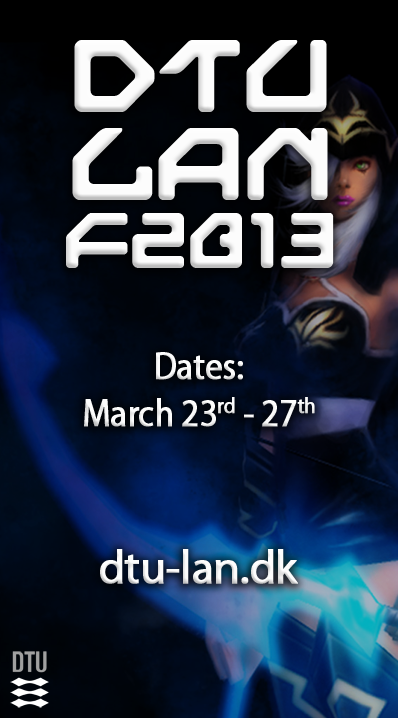
<style>
.page{position:relative;width:398px;height:718px}
.page>*{position:absolute;margin:0}
.t1{font:106.9px/87.5px "NextGames";letter-spacing:-0.025em;color:#fcfcfc}
.t2{font:82.6px/68.1px "NextGames";letter-spacing:-0.025em;color:#fcfcfc}
.t3{font:38.9px "MyriadPro-Regular";letter-spacing:-0.025em;color:#fcfcfc;font-weight:bold;scale:0.9 1}
.t4{font:46.7px "MyriadPro-Regular";letter-spacing:-0.025em;color:#fcfcfc;font-weight:bold}
</style>
<div class="page">
<p class="t1" style="left:66px;top:40px;width:268px;height:228px;text-align:center">DTU<br>LAN<br><span class="t2">F2013</span></p>
<p class="t3" style="left:84px;top:352px;width:231px;height:75px;text-align:center">Dates:<br>March 23rd - 27th</p>
<p class="t4" style="left:100px;top:549px;width:198px;height:35px">dtu-lan.dk</p>
</div>
